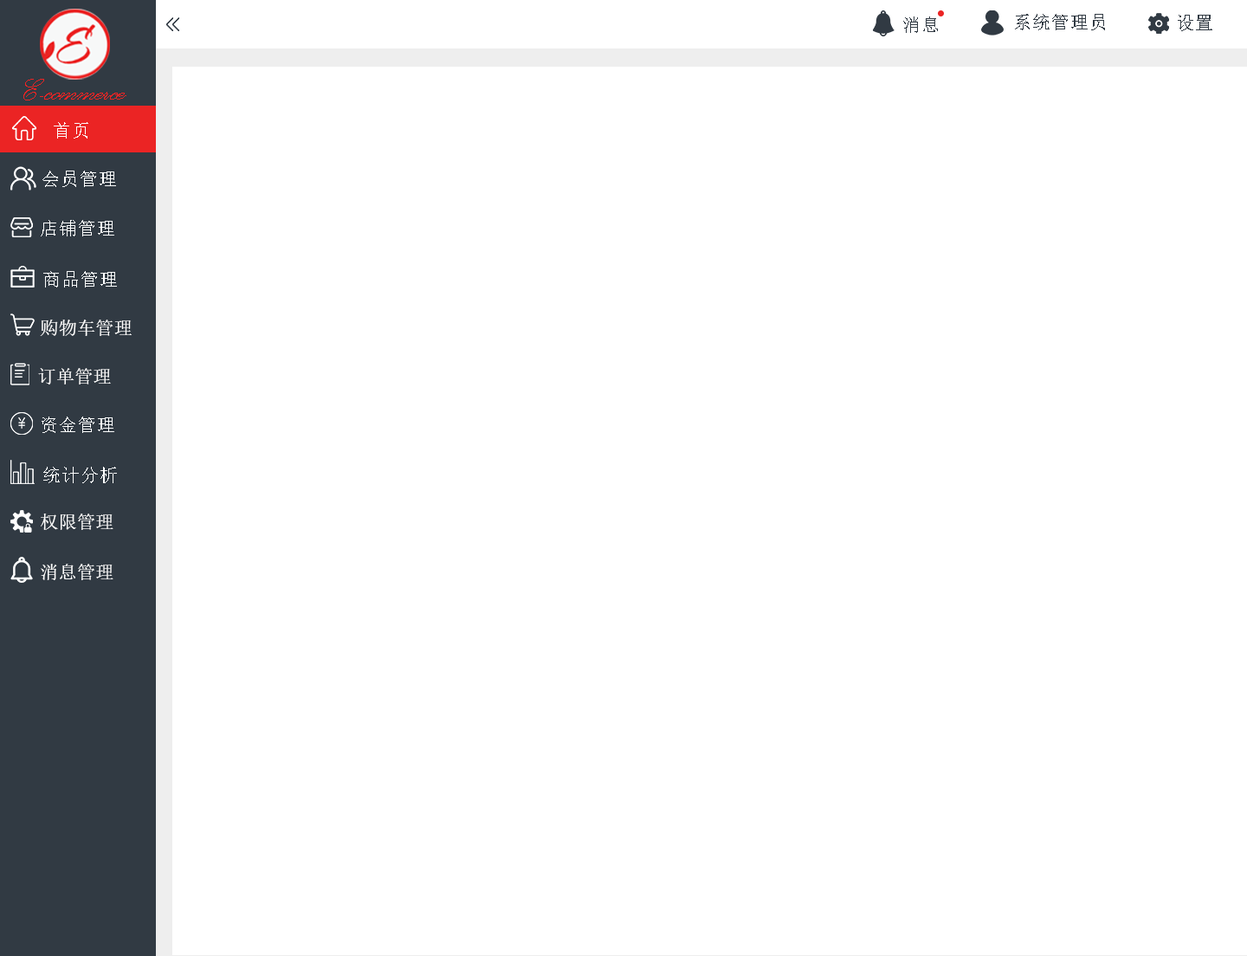
<style>
.page{position:relative;width:1247px;height:956px;background:#ffffff}
.page>*{position:absolute;margin:0}
.t1{font:18.5px "NSimSun";color:#313a43}
.t2{font:38.8px "PalaceScriptMT";color:#eb2424}
.t3{font:18.5px "NSimSun";color:#feffff}
.t4{font:18.5px "SimSun";color:#ffffff}
</style>
<div class="page">
<p class="t1" style="left:903px;top:16px;width:35px;height:17px">消息</p>
<p class="t1" style="left:1015px;top:14px;width:90px;height:16px">系统管理员</p>
<p class="t1" style="left:1178px;top:15px;width:34px;height:16px">设置</p>
<p class="t2" style="left:23px;top:79px;width:103px;height:21px">E-commerce</p>
<p class="t3" style="left:54px;top:122px;width:34px;height:17px">首页</p>
<p class="t3" style="left:42px;top:171px;width:74px;height:16px">会员管理</p>
<p class="t3" style="left:41px;top:220px;width:73px;height:16px">店铺管理</p>
<p class="t3" style="left:43px;top:271px;width:74px;height:17px">商品管理</p>
<p class="t4" style="left:40px;top:320px;width:92px;height:16px">购物车管理</p>
<p class="t4" style="left:38px;top:368px;width:73px;height:17px">订单管理</p>
<p class="t3" style="left:42px;top:417px;width:72px;height:16px">资金管理</p>
<p class="t3" style="left:43px;top:467px;width:74px;height:16px">统计分析</p>
<p class="t4" style="left:41px;top:514px;width:72px;height:16px">权限管理</p>
<p class="t4" style="left:41px;top:564px;width:72px;height:16px">消息管理</p>
</div>
